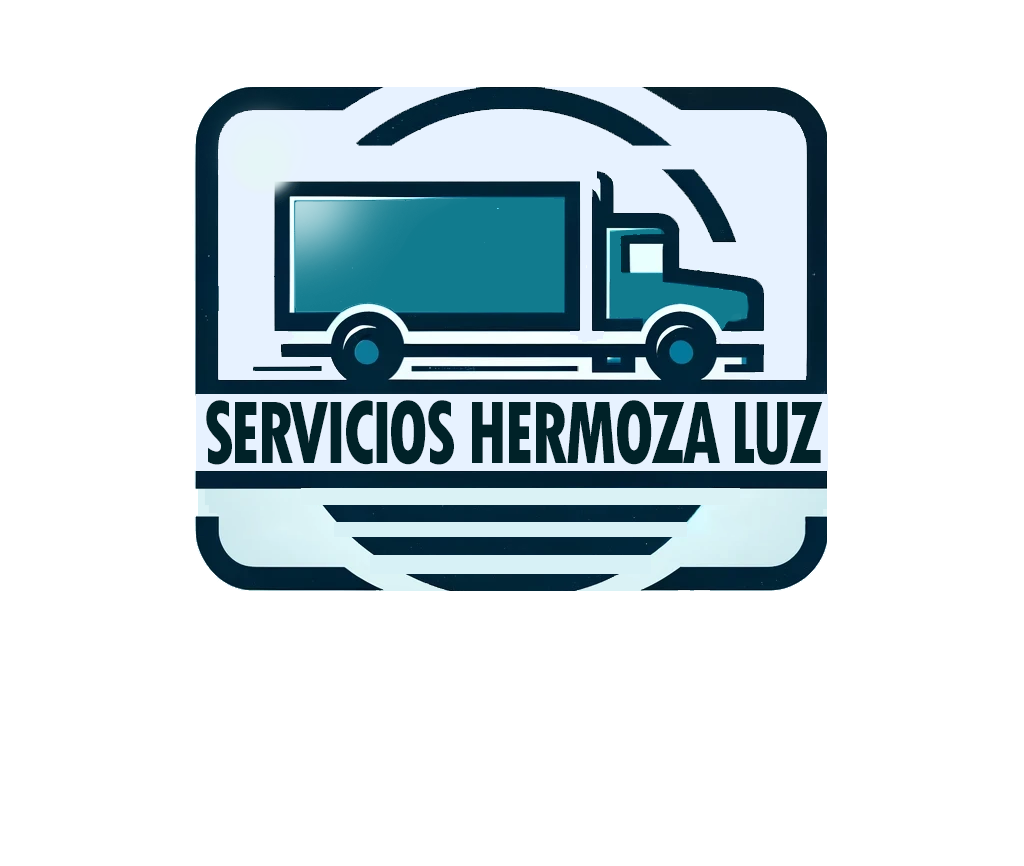
<style>
.page{position:relative;width:1024px;height:866px;background:#ffffff}
.page>*{position:absolute;margin:0}
.t1{font:93.6px "TwCenMT-CondensedExtraBold";letter-spacing:-0.05em;color:#002228;scale:0.77 1}
</style>
<div class="page">
<p class="t1" style="left:206px;top:400px;width:617px;height:65px">SERVICIOS HERMOZA LUZ</p>
</div>
